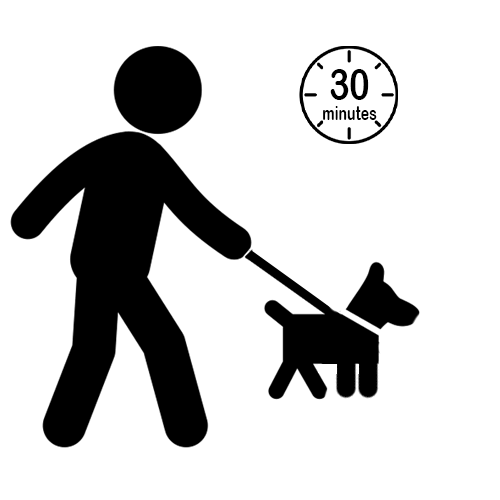
<style>
.page{position:relative;width:500px;height:500px;background:#ffffff}
.page>*{position:absolute;margin:0}
.t1{font:44.3px "ArialRoundedMTBold";color:#000000;scale:0.78 1}
.t2{font:19px "ArialRoundedMTBold";color:#000000;scale:0.75 1}
</style>
<div class="page">
<p class="t1" style="left:330px;top:69px;width:39px;height:31px">30</p>
<p class="t2" style="left:323px;top:106px;width:54px;height:14px">minutes</p>
</div>
